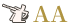
<style>
.page{position:relative;width:69px;height:27px;background:#ffffff}
.page>*{position:absolute;margin:0}
.t1{font:22px "RyuminPro-ExBold";letter-spacing:-0.04em;color:#af9441}
</style>
<div class="page">
<p class="t1" style="left:33px;top:5px;width:35px;height:17px">AA</p>
</div>
